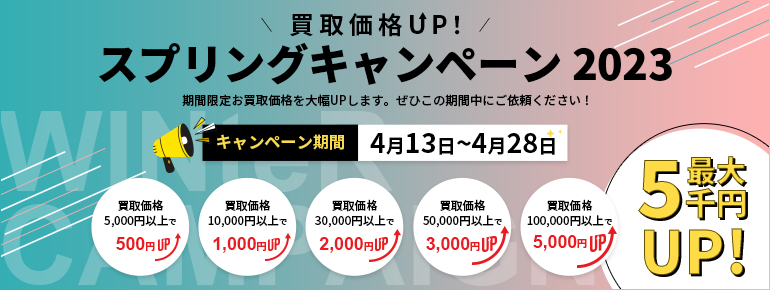
<style>
.page{position:relative;width:770px;height:290px;background:#ffffff}
.page>*{position:absolute;margin:0}
.t1{font:24.7px "NotoSansCJKjp-Bold";letter-spacing:0.2em;color:#000000}
.t2{font:42.4px "NotoSansCJKjp-Black";color:#000000}
.t3{font:12.3px "NotoSansCJKjp-Medium";color:#000000}
.t4{font:16.2px "NotoSansCJKjp-Bold";color:#f8db4e}
.t5{font:26.9px "NotoSansCJKjp-Bold";color:#000000}
.t6{font:19.2px "NotoSansCJKjp-Bold";color:#000000}
.t7{font:31.6px "NotoSansCJKjp-Black";color:#fddc48}
.t8{font:80.2px "NotoSansCJKjp-Black";color:#fddc48}
.t9{font:30.1px "NotoSansCJKjp-Black"}
.t10{font:11.6px/19.3px "NotoSansCJKjp-Medium";color:#000000}
.t11{font:11.6px/14.6px "NotoSansCJKjp-Medium";color:#000000}
.t12{font:8.5px/19.3px "NotoSansCJKjp-Medium";color:#000000}
.t13{font:59.5px "NotoSansCJKjp-Black";color:#fddc48}
.t14{font:17.7px "Arial-BoldMT";color:#e91a20}
.t15{font:10px "NotoSansCJKjp-Bold";color:#e91a20}
</style>
<div class="page">
<p class="t1" style="left:290px;top:13px;width:170px;height:24px">買取価格UP！</p>
<p class="t2" style="left:99px;top:42px;width:573px;height:43px">スプリングキャンペーン 2023</p>
<p class="t3" style="left:182px;top:94px;width:406px;height:13px">期間限定お買取価格を大幅UPします。ぜひこの期間中にご依頼ください！</p>
<p class="t4" style="left:217px;top:134px;width:127px;height:16px">キャンペーン期間</p>
<p class="t5" style="left:370px;top:133px;width:185px;height:22px">4<span class="t6">月</span>13<span class="t6">日</span>~4<span class="t6">月</span>28<span class="t6">日</span></p>
<p class="t7" style="left:638px;top:160px;width:108px;height:59px"><span class="t8">5</span>千円</p>
<p class="t9" style="left:687px;top:156px;width:59px;height:29px">最大</p>
<p class="t10" style="left:104px;top:199px;width:73px;height:29px;text-align:center"><span class="t11">買取価格<br></span>5,000円以上<span class="t12">で</span></p>
<p class="t10" style="left:208px;top:199px;width:79px;height:29px;text-align:center"><span class="t11">買取価格<br></span>10,000円以上<span class="t12">で</span></p>
<p class="t10" style="left:315px;top:199px;width:79px;height:29px;text-align:center"><span class="t11">買取価格<br></span>30,000円以上<span class="t12">で</span></p>
<p class="t10" style="left:423px;top:199px;width:79px;height:29px;text-align:center"><span class="t11">買取価格<br></span>50,000円以上<span class="t12">で</span></p>
<p class="t10" style="left:527px;top:199px;width:86px;height:29px;text-align:center"><span class="t11">買取価格<br></span>100,000円以上<span class="t12">で</span></p>
<p class="t13" style="left:644px;top:228px;width:99px;height:47px">UP!</p>
<p class="t14" style="left:116px;top:237px;width:39px;height:14px">500<span class="t15">円</span></p>
<p class="t14" style="left:213px;top:237px;width:53px;height:16px">1,000<span class="t15">円</span></p>
<p class="t14" style="left:319px;top:237px;width:54px;height:16px">2,000<span class="t15">円</span></p>
<p class="t14" style="left:426px;top:237px;width:54px;height:16px">3,000<span class="t15">円</span></p>
<p class="t14" style="left:533px;top:235px;width:54px;height:16px">5,000<span class="t15">円</span></p>
</div>
